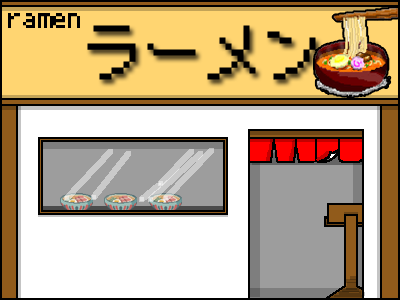
<style>
.page{position:relative;width:400px;height:300px;background:#ffffff}
.page>*{position:absolute;margin:0}
.t1{font:30px "PixelMplus10-Regular";color:#000000}
.t2{font:60px "PixelMplus10-Regular";color:#000000}
</style>
<div class="page">
<p class="t1" style="left:8px;top:13px;width:72px;height:15px">ramen</p>
<p class="t2" style="left:87px;top:25px;width:229px;height:55px">ラーメン</p>
</div>
